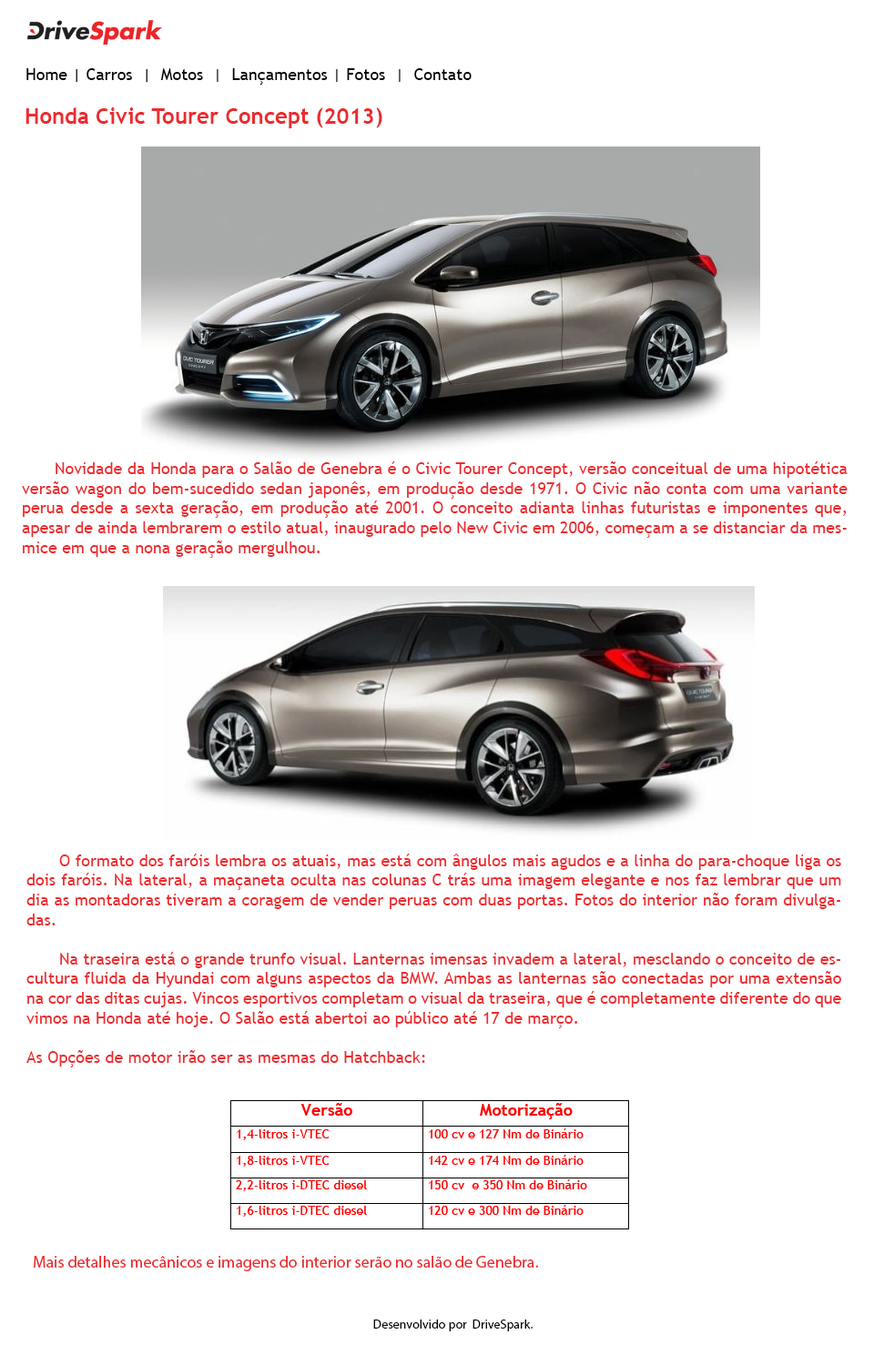
<style>
.page{position:relative;width:874px;height:1365px;background:#ffffff}
.page>*{position:absolute;margin:0}
.t1{font:16.4px "TrebuchetMS";color:#000000}
.t2{font:21.8px "TrebuchetMS-Bold";color:#eb2c30}
.t3{font:16.4px "TrebuchetMS";color:#eb2c30}
.t4{font:16.4px "MyriadPro-Regular";color:#eb2c30}
.t5{font:12.7px "MyriadPro-Regular";color:#000000}
</style>
<div class="page">
<p class="t1" style="left:26px;top:68px;width:445px;height:17px">Home | Carros  |  Motos  |  Lançamentos | Fotos  |  Contato</p>
<p class="t2" style="left:25px;top:107px;width:357px;height:21px">Honda Civic Tourer Concept (2013)</p>
<p class="t3" style="left:22px;top:461px;width:825px;height:97px;text-align:justify">Novidade da Honda para o Salão de Genebra é o Civic Tourer Concept, versão conceitual de uma hipotética versão wagon do bem-sucedido sedan japonês, em produção desde 1971. O Civic não conta com uma variante perua desde a sexta geração, em produção até 2001. O conceito adianta linhas futuristas e imponentes que, apesar de ainda lembrarem o estilo atual, inaugurado pelo New Civic em 2006, começam a se distanciar da mesmice em que a nona geração mergulhou.</p>
<p class="t3" style="left:26px;top:854px;width:815px;height:213px;text-align:justify">O formato dos faróis lembra os atuais, mas está com ângulos mais agudos e a linha do para-choque liga os dois faróis. Na lateral, a maçaneta oculta nas colunas C trás uma imagem elegante e nos faz lembrar que um dia as montadoras tiveram a coragem de vender peruas com duas portas. Fotos do interior não foram divulgadas.<br><br> Na traseira está o grande trunfo visual. Lanternas imensas invadem a lateral, mesclando o conceito de escultura fluida da Hyundai com alguns aspectos da BMW. Ambas as lanternas são conectadas por uma extensão na cor das ditas cujas. Vincos esportivos completam o visual da traseira, que é completamente diferente do que vimos na Honda até hoje. O Salão está abertoi ao público até 17 de março.<br><br>As Opções de motor irão ser as mesmas do Hatchback:</p>
<p class="t4" style="left:34px;top:1256px;width:504px;height:15px">Mais detalhes mecânicos e imagens do interior serão no salão de Genebra.</p>
<p class="t5" style="left:373px;top:1319px;width:159px;height:12px">Desenvolvido por  DriveSpark.</p>
</div>
